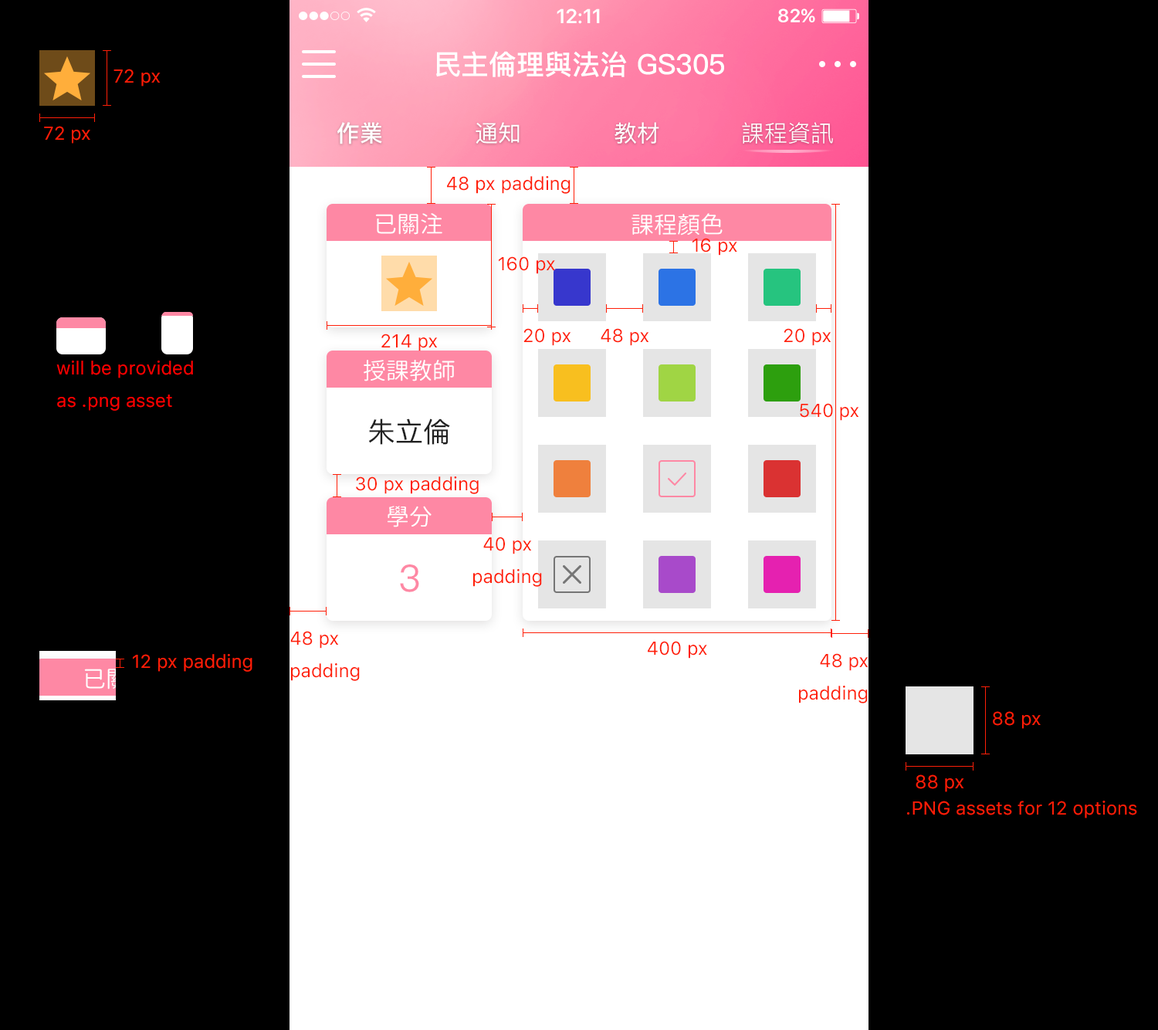
<style>
.page{position:relative;width:1158px;height:1030px;background:#000000}
.page>*{position:absolute;margin:0}
.t1{font:20.1px "SFUIDisplay-Semibold";color:#ffffff}
.t2{font:18.5px "SFUIDisplay-Semibold";letter-spacing:0.025em;color:#ffffff}
.t3{font:27.8px "PingFang-SC-Bold";color:#ffffff}
.t4{font:18.5px "SFUIText-Regular";color:#ff1e07}
.t5{font:23.2px "PingFang-SC-Bold";color:#ffffff}
.t6{font:23.2px "PingFang-SC-Medium";color:#ffffff}
.t7{font:23.2px "PingFang-SC-Regular";color:#ffffff}
.t8{font:23.2px "GenJyuuGothic-Normal";color:#ffffff}
.t9{font:18.5px "SFUIText-Regular";color:#ff0000}
.t10{font:27.8px "PingFang-SC-Medium";color:#212121}
.t11{font:37.1px "PingFang-SC-Medium";color:#fe88a4}
</style>
<div class="page">
<p class="t1" style="left:557px;top:8px;width:43px;height:16px">12:11</p>
<p class="t2" style="left:778px;top:8px;width:37px;height:14px">82%</p>
<p class="t3" style="left:436px;top:51px;width:288px;height:26px">民主倫理與法治 GS305</p>
<p class="t4" style="left:113px;top:69px;width:48px;height:17px">72 px</p>
<p class="t4" style="left:44px;top:126px;width:46px;height:18px">72 px</p>
<p class="t5" style="left:337px;top:122px;width:45px;height:22px">作業</p>
<p class="t6" style="left:476px;top:122px;width:44px;height:22px">通知</p>
<p class="t6" style="left:614px;top:122px;width:45px;height:22px">教材</p>
<p class="t7" style="left:742px;top:122px;width:91px;height:22px">課程資訊</p>
<p class="t4" style="left:447px;top:176px;width:123px;height:18px">48 px padding</p>
<p class="t8" style="left:375px;top:213px;width:67px;height:22px">已關注</p>
<p class="t8" style="left:631px;top:213px;width:92px;height:22px">課程顏色</p>
<p class="t4" style="left:692px;top:238px;width:45px;height:18px">16 px</p>
<p class="t4" style="left:499px;top:256px;width:56px;height:18px">160 px</p>
<p class="t4" style="left:523px;top:328px;width:48px;height:18px">20 px</p>
<p class="t4" style="left:601px;top:328px;width:48px;height:18px">48 px</p>
<p class="t4" style="left:784px;top:328px;width:47px;height:18px">20 px</p>
<p class="t4" style="left:381px;top:333px;width:57px;height:18px">214 px</p>
<p class="t9" style="left:56px;top:361px;width:137px;height:50px">will be provided<br>as .png asset</p>
<p class="t8" style="left:364px;top:360px;width:91px;height:21px">授課教師</p>
<p class="t4" style="left:800px;top:403px;width:59px;height:18px">540 px</p>
<p class="t10" style="left:368px;top:418px;width:82px;height:27px">朱立倫</p>
<p class="t4" style="left:356px;top:476px;width:123px;height:18px">30 px padding</p>
<p class="t8" style="left:388px;top:506px;width:44px;height:21px">學分</p>
<p class="t4" style="left:473px;top:537px;width:69px;height:50px;text-align:center">40 px<br>padding</p>
<p class="t11" style="left:400px;top:564px;width:19px;height:28px">3</p>
<p class="t4" style="left:290px;top:631px;width:70px;height:50px">48 px<br>padding</p>
<p class="t4" style="left:648px;top:641px;width:59px;height:17px">400 px</p>
<p class="t4" style="left:133px;top:654px;width:119px;height:18px">12 px padding</p>
<p class="t4" style="left:799px;top:653px;width:69px;height:50px;text-align:right">48 px<br>padding</p>
<p class="t4" style="left:993px;top:711px;width:48px;height:18px">88 px</p>
<p class="t4" style="left:916px;top:774px;width:48px;height:18px">88 px</p>
<p class="t4" style="left:907px;top:801px;width:230px;height:17px">.PNG assets for 12 options</p>
</div>
